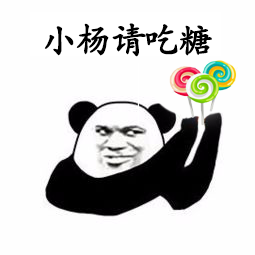
<style>
.page{position:relative;width:255px;height:255px;background:#fefefe}
.page>*{position:absolute;margin:0}
.t1{font:35.8px "STKaitiTC-Regular";letter-spacing:-0.08em;color:#000000;font-weight:bold}
</style>
<div class="page">
<p class="t1" style="left:44px;top:23px;width:168px;height:34px">小杨请吃糖</p>
</div>
